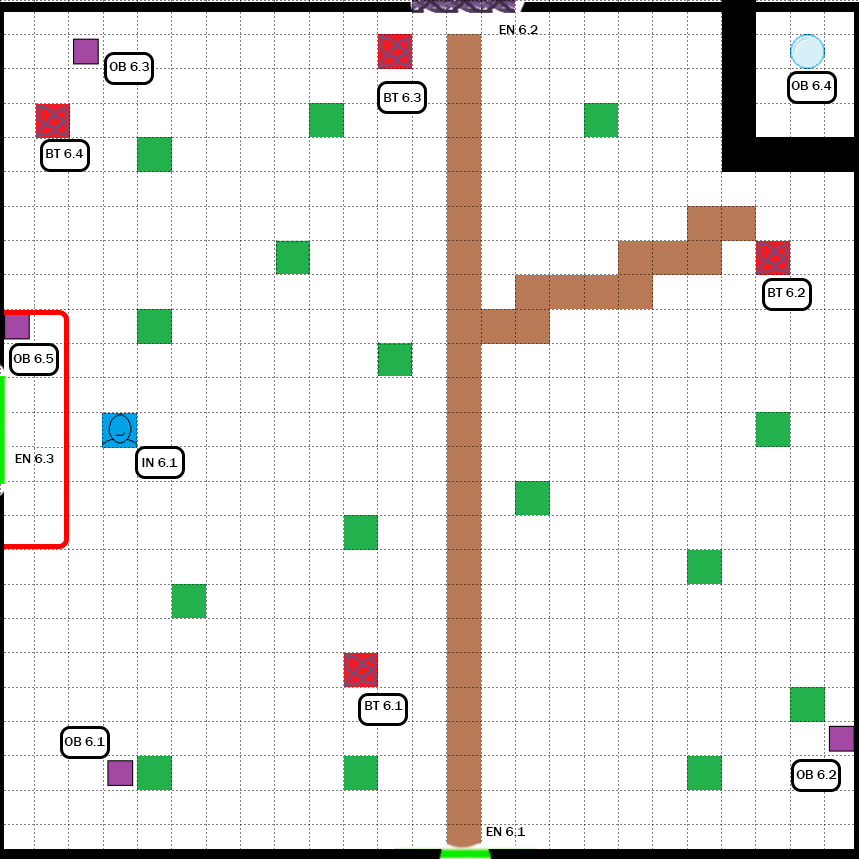
<style>
.page{position:relative;width:859px;height:859px;background:#ffffff}
.page>*{position:absolute;margin:0}
.t1{font:13.8px "FranklinGothic-Medium";color:#000000}
</style>
<div class="page">
<p class="t1" style="left:499px;top:25px;width:39px;height:9px">EN 6.2</p>
<p class="t1" style="left:109px;top:62px;width:41px;height:9px">OB 6.3</p>
<p class="t1" style="left:791px;top:81px;width:41px;height:9px">OB 6.4</p>
<p class="t1" style="left:384px;top:93px;width:37px;height:9px">BT 6.3</p>
<p class="t1" style="left:46px;top:149px;width:38px;height:9px">BT 6.4</p>
<p class="t1" style="left:768px;top:288px;width:37px;height:9px">BT 6.2</p>
<p class="t1" style="left:13px;top:354px;width:41px;height:9px">OB 6.5</p>
<p class="t1" style="left:15px;top:454px;width:39px;height:9px">EN 6.3</p>
<p class="t1" style="left:142px;top:458px;width:36px;height:9px">IN 6.1</p>
<p class="t1" style="left:365px;top:701px;width:38px;height:9px">BT 6.1</p>
<p class="t1" style="left:64px;top:737px;width:41px;height:9px">OB 6.1</p>
<p class="t1" style="left:796px;top:770px;width:41px;height:9px">OB 6.2</p>
<p class="t1" style="left:486px;top:827px;width:40px;height:9px">EN 6.1</p>
</div>
